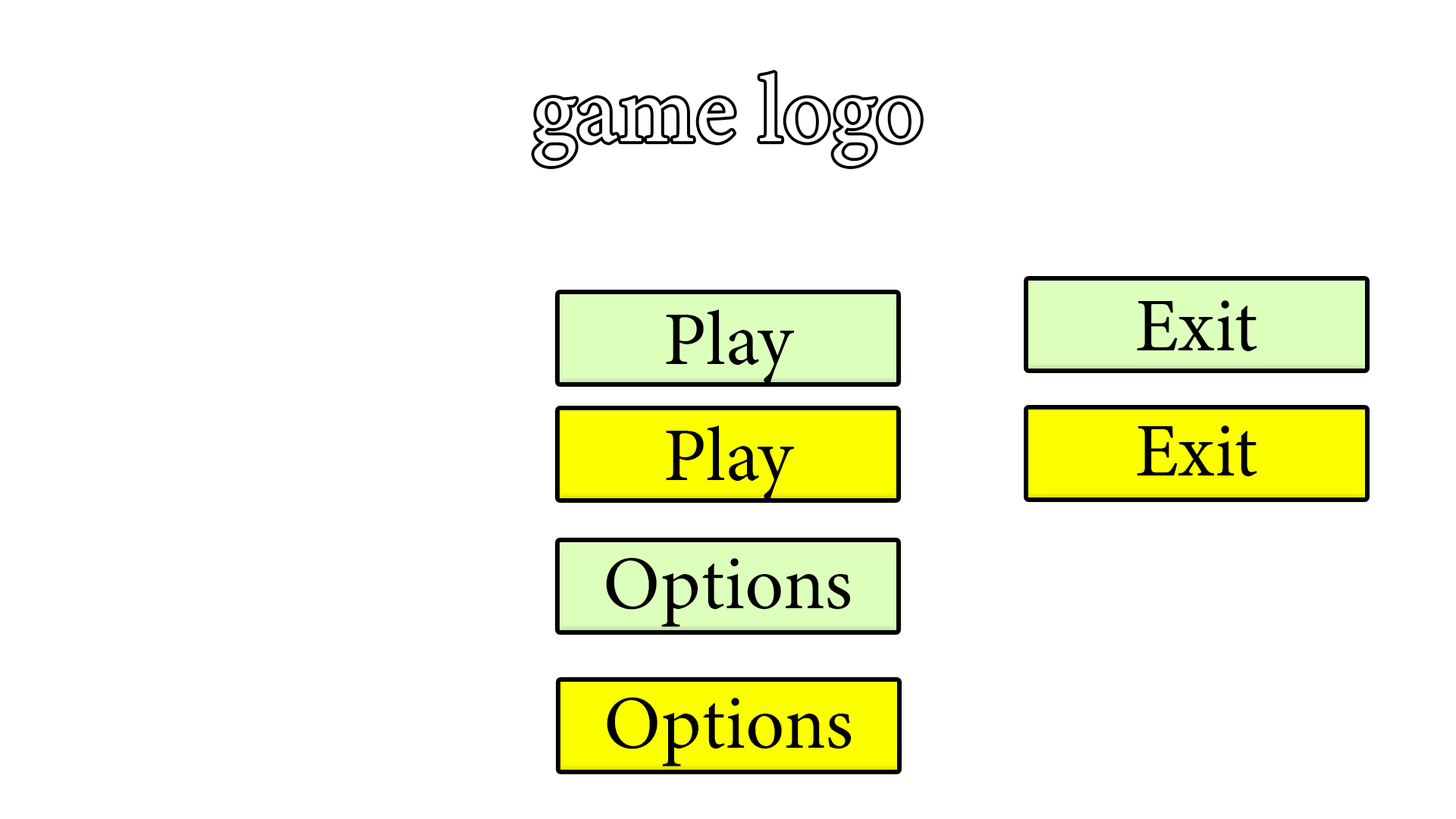
<style>
.page{position:relative;width:1456px;height:819px;background:#ffffff}
.page>*{position:absolute;margin:0}
.t1{font:75.8px "MinionVariableConcept-Roman";color:#000000}
</style>
<div class="page">
<p class="t1" style="left:1137px;top:300px;width:120px;height:52px">Exit</p>
<p class="t1" style="left:666px;top:309px;width:128px;height:75px">Play</p>
<p class="t1" style="left:666px;top:425px;width:128px;height:75px">Play</p>
<p class="t1" style="left:1137px;top:425px;width:120px;height:52px">Exit</p>
<p class="t1" style="left:606px;top:557px;width:244px;height:70px">Options</p>
<p class="t1" style="left:607px;top:697px;width:244px;height:70px">Options</p>
</div>
